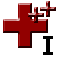
<style>
.page{position:relative;width:64px;height:64px;background:#ffffff}
.page>*{position:absolute;margin:0}
.t1{font:25px "Tahoma-Bold";color:#000000}
</style>
<div class="page">
<p class="t1" style="left:43px;top:36px;width:10px;height:19px">I</p>
</div>
